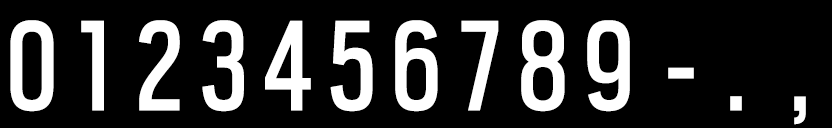
<style>
.page{position:relative;width:832px;height:128px;background:#000000}
.page>*{position:absolute;margin:0}
.t1{font:143px "ScoutCond-Regular";letter-spacing:0.025em;color:#ffffff;scale:0.91 1}
.t2{font:70px "ScoutCond-Regular";letter-spacing:0.025em;color:#ffffff;scale:0.91 1}
</style>
<div class="page">
<p class="t1" style="left:10px;top:20px;width:44px;height:92px"><span class="t2"><br></span>0</p>
<p class="t1" style="left:81px;top:20px;width:23px;height:91px"><span class="t2"><br></span>1</p>
<p class="t1" style="left:139px;top:20px;width:41px;height:91px"><span class="t2"><br></span>2</p>
<p class="t1" style="left:202px;top:20px;width:42px;height:92px"><span class="t2"><br></span>3</p>
<p class="t1" style="left:265px;top:20px;width:46px;height:91px"><span class="t2"><br></span>4</p>
<p class="t1" style="left:330px;top:20px;width:43px;height:92px"><span class="t2"><br></span>5</p>
<p class="t1" style="left:395px;top:20px;width:43px;height:92px"><span class="t2"><br></span>6</p>
<p class="t1" style="left:461px;top:20px;width:38px;height:91px"><span class="t2"><br></span>7</p>
<p class="t1" style="left:521px;top:20px;width:44px;height:92px"><span class="t2"><br></span>8</p>
<p class="t1" style="left:587px;top:20px;width:43px;height:92px"><span class="t2"><br></span>9</p>
<p class="t1" style="left:668px;top:67px;width:26px;height:12px"><span class="t2"><br></span>-</p>
<p class="t1" style="left:730px;top:96px;width:12px;height:15px"><span class="t2"><br></span>.</p>
<p class="t1" style="left:794px;top:96px;width:12px;height:29px">,</p>
</div>
